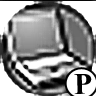
<style>
.page{position:relative;width:96px;height:96px;background:#ffffff}
.page>*{position:absolute;margin:0}
.t1{font:30px "TimesNewRomanPS-BoldMT";color:#000000}
</style>
<div class="page">
<p class="t1" style="left:74px;top:73px;width:18px;height:20px;rotate:-1deg">P</p>
</div>
